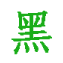
<style>
.page{position:relative;width:63px;height:63px;background:#ffffff}
.page>*{position:absolute;margin:0}
.t1{font:48px "·ÂËÎ-Regular";letter-spacing:0.025em;color:#1aad19;font-weight:bold}
</style>
<div class="page">
<p class="t1" style="left:11px;top:10px;width:41px;height:45px">黑</p>
</div>
